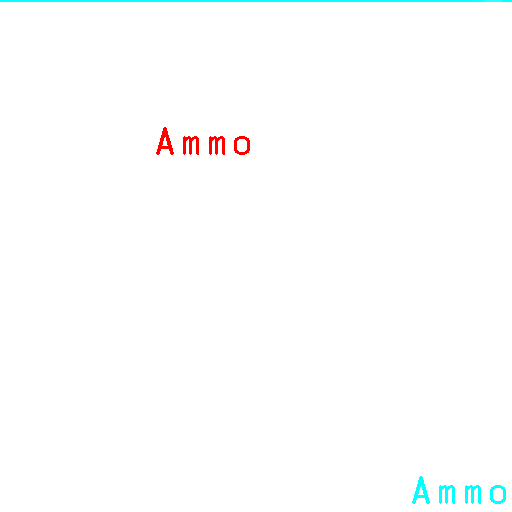
<style>
.page{position:relative;width:512px;height:512px;background:#ffffff}
.page>*{position:absolute;margin:0}
.t1{font:36px "OCRAStd";color:#00ffff}
</style>
<div class="page">
<p class="t1" style="left:412px;top:474px;width:94px;height:28px">Ammo</p>
</div>
